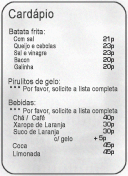
<style>
.page{position:relative;width:128px;height:176px}
.page>*{position:absolute;margin:0}
.t1{font:12.3px "ArialMT";color:#4a4b4a;font-weight:bold;scale:0.87 1}
.t2{font:7.7px "ArialMT";color:#4a4b4a;font-weight:bold;scale:0.87 1}
.t3{font:6.4px "ArialMT";font-weight:bold;scale:0.83 1}
.t4{font:6.4px "ArialMT";color:#4a4b4a;font-weight:bold;scale:0.83 1}
.t5{font:8px "ArialMT";color:#4a4b4a;font-weight:bold;scale:0.83 1}
.t6{font:6.9px "ArialMT";font-weight:bold;scale:0.87 1}
.t7{font:6.9px "ArialMT";color:#4a4b4a;font-weight:bold;scale:0.87 1}
</style>
<div class="page">
<p class="t1" style="left:8px;top:8px;width:46px;height:13px">Cardápio</p>
<p class="t2" style="left:9px;top:28px;width:36px;height:7px">Batata frita:</p>
<p class="t3" style="left:13px;top:36px;width:21px;height:6px">Com sal</p>
<p class="t4" style="left:14px;top:43px;width:42px;height:7px">Queijo e cebolas</p>
<p class="t3" style="left:14px;top:50px;width:33px;height:7px">Sal e vinagre</p>
<p class="t3" style="left:14px;top:57px;width:16px;height:6px">Bacon</p>
<p class="t4" style="left:14px;top:64px;width:20px;height:6px">Galinha</p>
<p class="t5" style="left:8px;top:78px;width:52px;height:8px">Pirulitos de gelo:</p>
<p class="t6" style="left:23px;top:86px;width:95px;height:7px">Por favor, solicite a lista completa</p>
<p class="t2" style="left:8px;top:99px;width:28px;height:7px">Bebidas:</p>
<p class="t6" style="left:23px;top:108px;width:95px;height:7px">Por favor, solicite a lista completa</p>
<p class="t7" style="left:13px;top:122px;width:53px;height:7px">Xarope de Laranja</p>
<p class="t7" style="left:13px;top:115px;width:32px;height:6px">Chá /  Café</p>
<p class="t7" style="left:13px;top:129px;width:46px;height:7px">Suco de Laranja</p>
<p class="t7" style="left:54px;top:136px;width:19px;height:7px">c/ gelo</p>
<p class="t6" style="left:12px;top:143px;width:15px;height:6px">Coca</p>
<p class="t7" style="left:13px;top:151px;width:28px;height:6px">Limonada</p>
</div>
